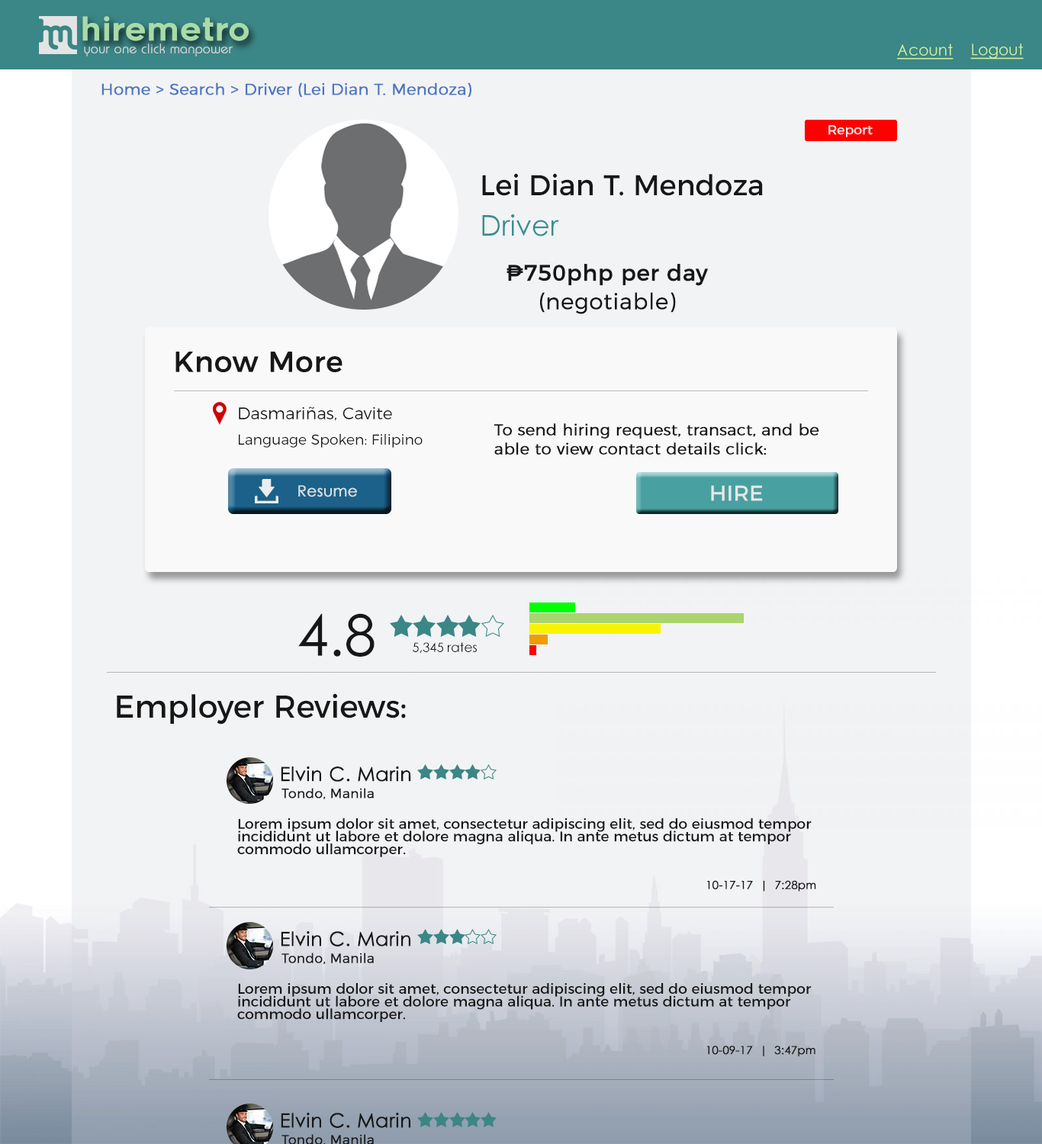
<style>
.page{position:relative;width:1042px;height:1144px;background:#f2f3f5}
.page>*{position:absolute;margin:0}
.t1{font:32.1px "Renogare-Regular";color:#a8dba8}
.t2{font:13.4px "Brie-Light";color:#d5d5d5;font-weight:bold}
.t3{font:15.7px "CenturyGothic";color:#cff09e;text-decoration:underline}
.t4{font:15.9px "Montserrat-Light";color:#4c76c1;font-weight:bold}
.t5{font:13.1px "Montserrat-Regular";color:#e7e7e7}
.t6{font:28.6px "Montserrat-Regular";color:#171717}
.t7{font:28.6px "CenturyGothic";color:#388f8f}
.t8{font:22.3px/28.6px "Montserrat-Regular";color:#171717;font-weight:bold}
.t9{font:22.3px/28.6px "Montserrat-Light";color:#171717;font-weight:bold}
.t10{font:28.6px "Montserrat-Regular";color:#171717;font-weight:bold}
.t11{font:16.9px "Montserrat-Light";color:#171717}
.t12{font:15.9px "Montserrat-Light";color:#171717;font-weight:bold}
.t13{font:14.4px "Montserrat-Light";color:#171717}
.t14{font:15.2px "CenturyGothic";color:#dedede;font-weight:bold}
.t15{font:21.4px "Montserrat-Regular";color:#e7e7e7}
.t16{font:57.2px "CenturyGothic";color:#171717}
.t17{font:12.7px "CenturyGothic";color:#171717}
.t18{font:31.7px "Montserrat-Regular";color:#171717}
.t19{font:19.5px "CenturyGothic";color:#171717;font-weight:bold}
.t20{font:13.2px "Montserrat-Light";color:#171717;font-weight:bold}
.t21{font:14.3px/12.7px "Montserrat-Regular";color:#171717}
.t22{font:11.1px "CenturyGothic";color:#171717;font-weight:bold}
.t23{font:13.3px "Montserrat-Light";color:#171717;font-weight:bold}
.t24{font:11.2px "CenturyGothic";color:#171717;font-weight:bold}
</style>
<div class="page">
<p class="t1" style="left:82px;top:16px;width:167px;height:25px">hiremetro</p>
<p class="t2" style="left:84px;top:43px;width:149px;height:13px">your one click manpower</p>
<p class="t3" style="left:897px;top:43px;width:57px;height:17px">Acount</p>
<p class="t3" style="left:970px;top:43px;width:54px;height:17px">Logout</p>
<p class="t4" style="left:101px;top:82px;width:370px;height:16px">Home &gt; Search &gt; Driver (Lei Dian T. Mendoza)</p>
<p class="t5" style="left:828px;top:125px;width:45px;height:12px">Report</p>
<p class="t6" style="left:482px;top:173px;width:281px;height:23px">Lei Dian T. Mendoza</p>
<p class="t7" style="left:482px;top:214px;width:77px;height:22px">Driver</p>
<p class="t8" style="left:507px;top:264px;width:201px;height:50px;text-align:center">₱750php per day<br><span class="t9">(negotiable)</span></p>
<p class="t10" style="left:175px;top:352px;width:168px;height:20px">Know More</p>
<p class="t11" style="left:239px;top:407px;width:153px;height:14px">Dasmariñas, Cavite</p>
<p class="t12" style="left:494px;top:423px;width:325px;height:32px">To send hiring request, transact, and be able to view contact details click:</p>
<p class="t13" style="left:239px;top:434px;width:184px;height:14px">Language Spoken: Filipino</p>
<p class="t14" style="left:298px;top:485px;width:59px;height:12px">Resume</p>
<p class="t15" style="left:711px;top:485px;width:52px;height:16px">HIRE</p>
<p class="t16" style="left:298px;top:613px;width:77px;height:44px">4.8</p>
<p class="t17" style="left:413px;top:642px;width:64px;height:12px">5,345 rates</p>
<p class="t18" style="left:117px;top:693px;width:289px;height:32px">Employer Reviews:</p>
<p class="t19" style="left:281px;top:766px;width:130px;height:16px">Elvin C. Marin</p>
<p class="t20" style="left:281px;top:788px;width:93px;height:11px">Tondo, Manila</p>
<p class="t21" style="left:237px;top:818px;width:575px;height:39px">Lorem ipsum dolor sit amet, consectetur adipiscing elit, sed do eiusmod tempor incididunt ut labore et dolore magna aliqua. In ante metus dictum at tempor commodo ullamcorper.</p>
<p class="t22" style="left:707px;top:880px;width:109px;height:12px">10-17-17  |  7:28pm</p>
<p class="t19" style="left:281px;top:931px;width:129px;height:16px">Elvin C. Marin</p>
<p class="t23" style="left:281px;top:953px;width:93px;height:11px">Tondo, Manila</p>
<p class="t21" style="left:237px;top:983px;width:575px;height:39px">Lorem ipsum dolor sit amet, consectetur adipiscing elit, sed do eiusmod tempor incididunt ut labore et dolore magna aliqua. In ante metus dictum at tempor commodo ullamcorper.</p>
<p class="t24" style="left:706px;top:1046px;width:109px;height:11px">10-09-17  |  3:47pm</p>
<p class="t19" style="left:281px;top:1113px;width:129px;height:15px">Elvin C. Marin</p>
<p class="t23" style="left:281px;top:1134px;width:93px;height:12px">Tondo, Manila</p>
</div>
